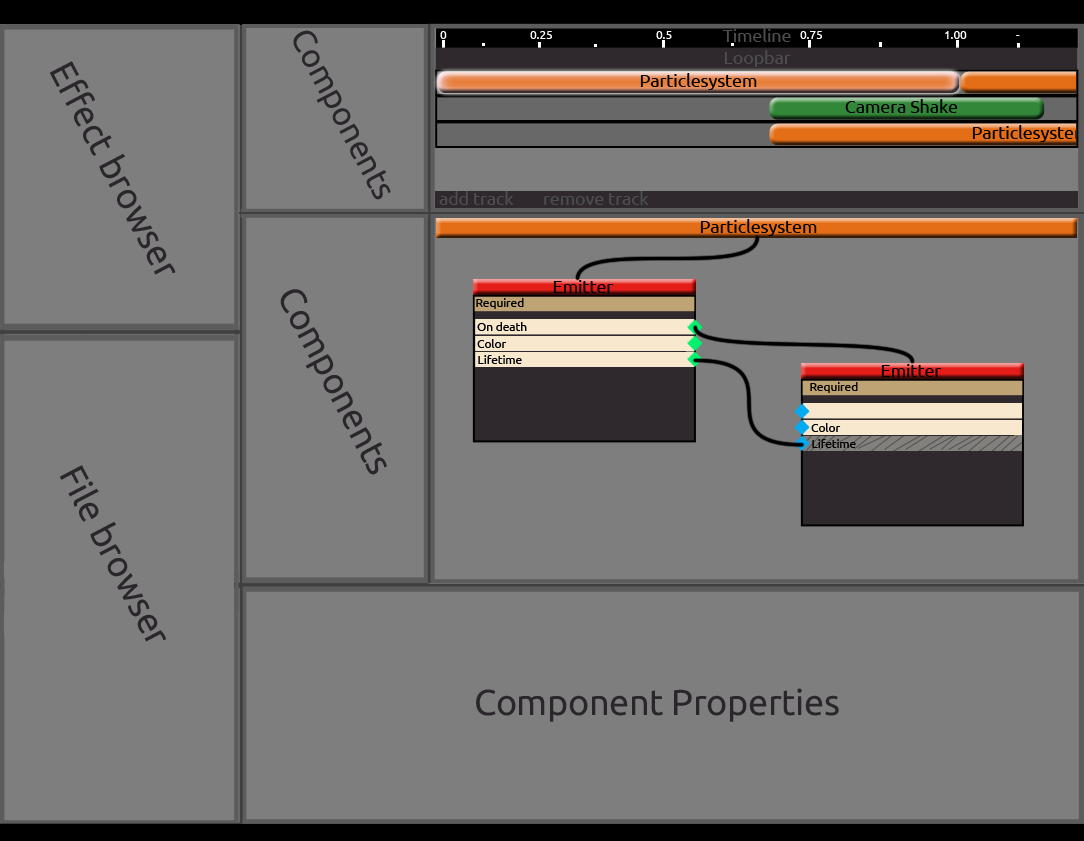
<style>
.page{position:relative;width:1084px;height:841px;background:#7e7e7e}
.page>*{position:absolute;margin:0}
.t1{font:32.9px "Ubuntu";letter-spacing:-0.01em;color:#2a262b}
.t2{font:18px "Ubuntu";letter-spacing:-0.01em;color:#4e4e4e}
.t3{font:36px "Ubuntu";letter-spacing:-0.01em;color:#2a262b}
.t4{font:18px "Ubuntu";letter-spacing:-0.01em;color:#000000}
.t5{font:12px "Ubuntu";letter-spacing:-0.01em;color:#000000}
</style>
<div class="page">
<p class="t1" style="left:293px;top:30px;width:98px;height:170px;rotate:62deg">Components</p>
<p class="t2" style="left:722px;top:28px;width:69px;height:14px">Timeline</p>
<p class="t2" style="left:724px;top:50px;width:67px;height:17px">Loopbar</p>
<p class="t3" style="left:49px;top:61px;width:127px;height:214px;rotate:62deg">Effect browser</p>
<p class="t4" style="left:640px;top:73px;width:117px;height:17px">Particlesystem</p>
<p class="t4" style="left:845px;top:99px;width:113px;height:14px">Camera Shake</p>
<p class="t4" style="left:972px;top:125px;width:112px;height:17px">Particlesystem</p>
<p class="t2" style="left:439px;top:191px;width:210px;height:14px">add track  remove track</p>
<p class="t4" style="left:700px;top:219px;width:117px;height:17px">Particlesystem</p>
<p class="t4" style="left:553px;top:280px;width:60px;height:13px">Emitter</p>
<p class="t3" style="left:280px;top:289px;width:107px;height:186px;rotate:62deg">Components</p>
<p class="t5" style="left:476px;top:298px;width:48px;height:11px">Required</p>
<p class="t5" style="left:477px;top:322px;width:50px;height:9px">On death</p>
<p class="t5" style="left:477px;top:339px;width:30px;height:9px">Color</p>
<p class="t5" style="left:478px;top:355px;width:44px;height:9px">Lifetime</p>
<p class="t4" style="left:881px;top:364px;width:60px;height:13px">Emitter</p>
<p class="t5" style="left:810px;top:382px;width:48px;height:11px">Required</p>
<p class="t5" style="left:811px;top:423px;width:30px;height:9px">Color</p>
<p class="t5" style="left:812px;top:439px;width:44px;height:9px">Lifetime</p>
<p class="t3" style="left:59px;top:465px;width:107px;height:177px;rotate:62deg">File browser</p>
<p class="t3" style="left:476px;top:688px;width:363px;height:34px">Component Properties</p>
</div>
